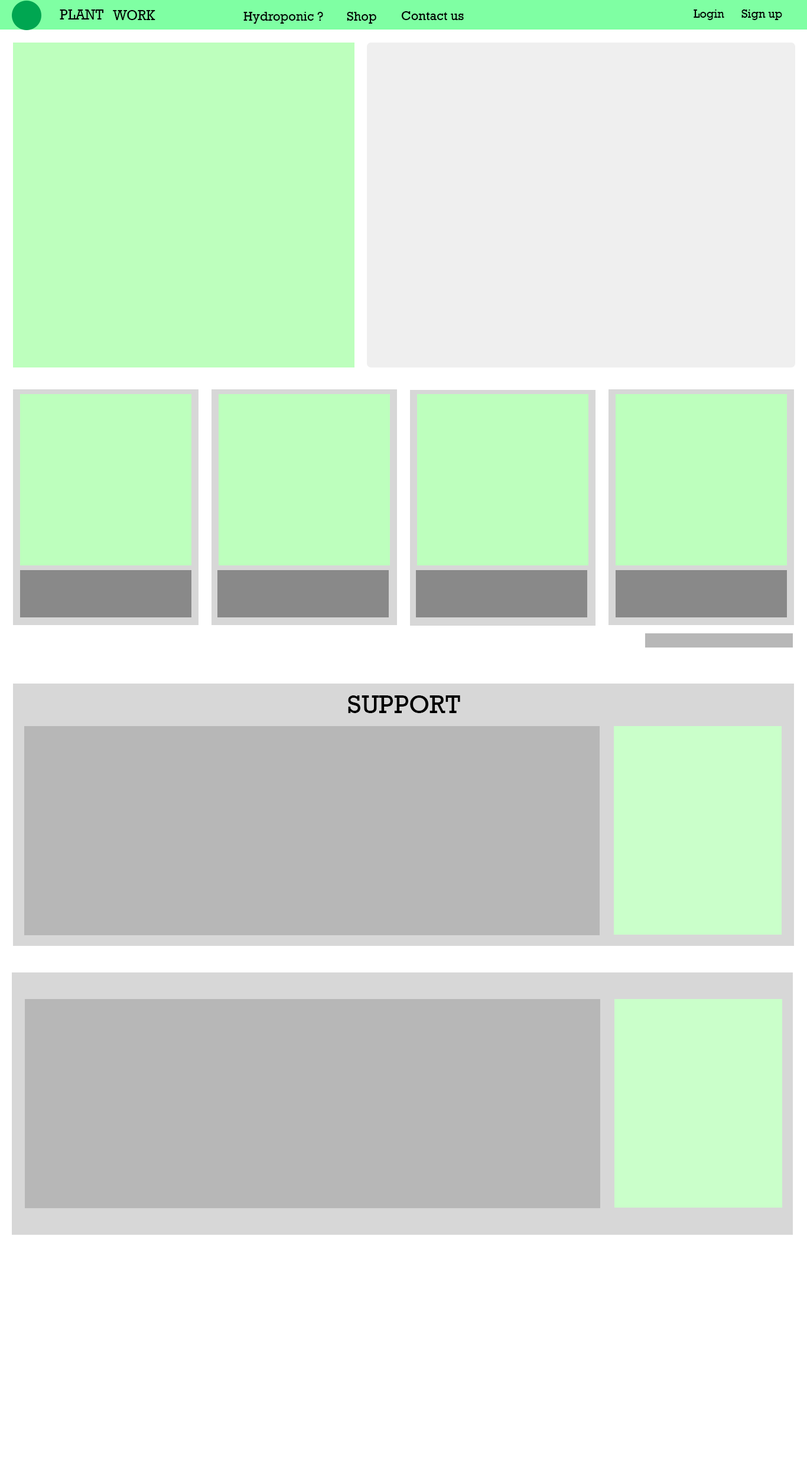
<style>
.page{position:relative;width:807px;height:1477px;background:#ffffff}
.page>*{position:absolute;margin:0}
.t1{font:14.2px "Rockwell";color:#000000}
.t2{font:13px "Rockwell";color:#000000}
.t3{font:11.8px "Rockwell";color:#000000}
.t4{font:26px "Rockwell";color:#000000}
</style>
<div class="page">
<p class="t1" style="left:60px;top:9px;width:43px;height:11px">PLANT</p>
<p class="t1" style="left:113px;top:10px;width:42px;height:10px">WORK</p>
<p class="t2" style="left:243px;top:12px;width:80px;height:12px">Hydroponic ?</p>
<p class="t2" style="left:347px;top:12px;width:29px;height:12px">Shop</p>
<p class="t2" style="left:401px;top:11px;width:63px;height:9px">Contact us</p>
<p class="t3" style="left:694px;top:9px;width:30px;height:11px">Login</p>
<p class="t3" style="left:742px;top:9px;width:40px;height:11px">Sign up</p>
<p class="t4" style="left:348px;top:696px;width:112px;height:17px">SUPPORT</p>
</div>
